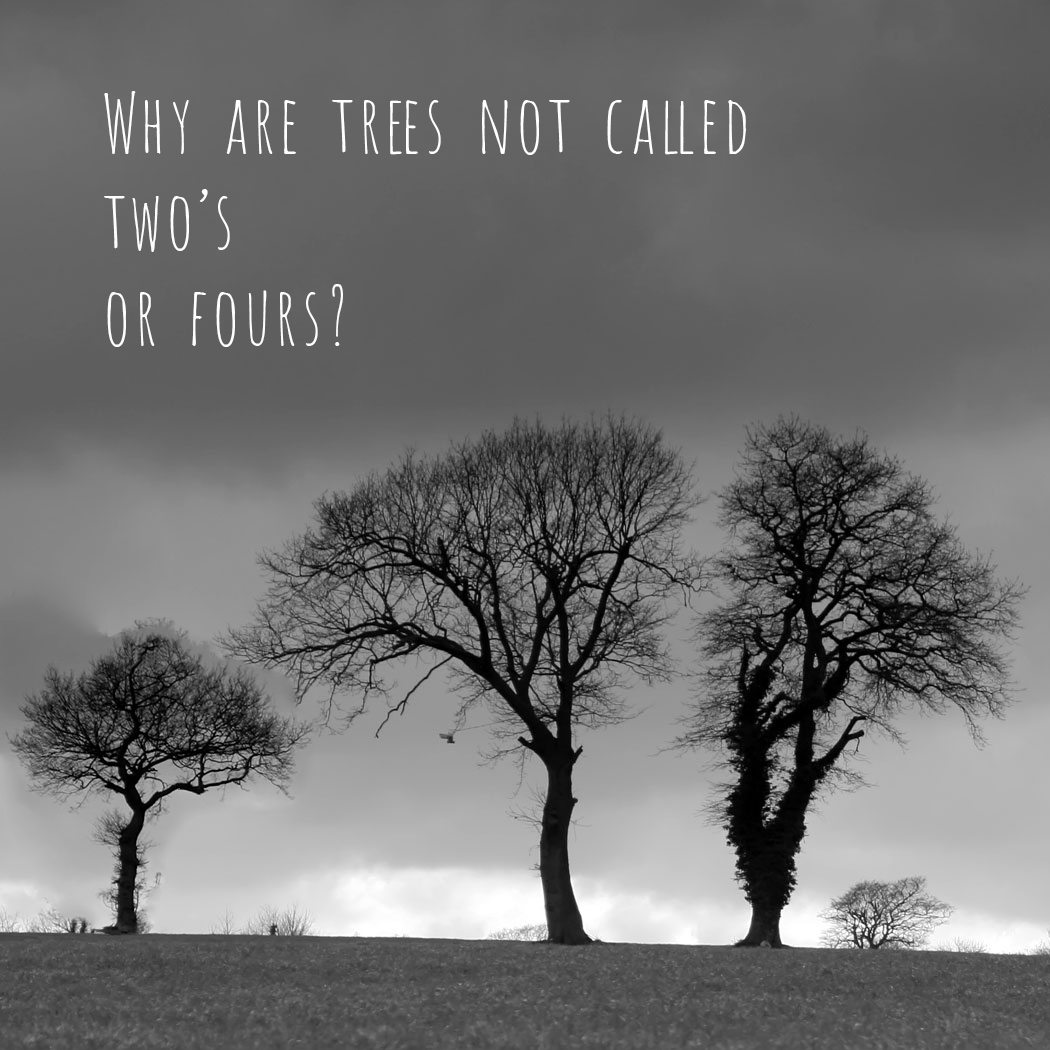
<style>
.page{position:relative;width:1050px;height:1050px}
.page>*{position:absolute;margin:0}
.t1{font:80px "Amatic";color:#fefefe}
</style>
<div class="page">
<p class="t1" style="left:104px;top:91px;width:643px;height:256px">Why are trees not called<br>two’s<br>or fours?</p>
</div>
